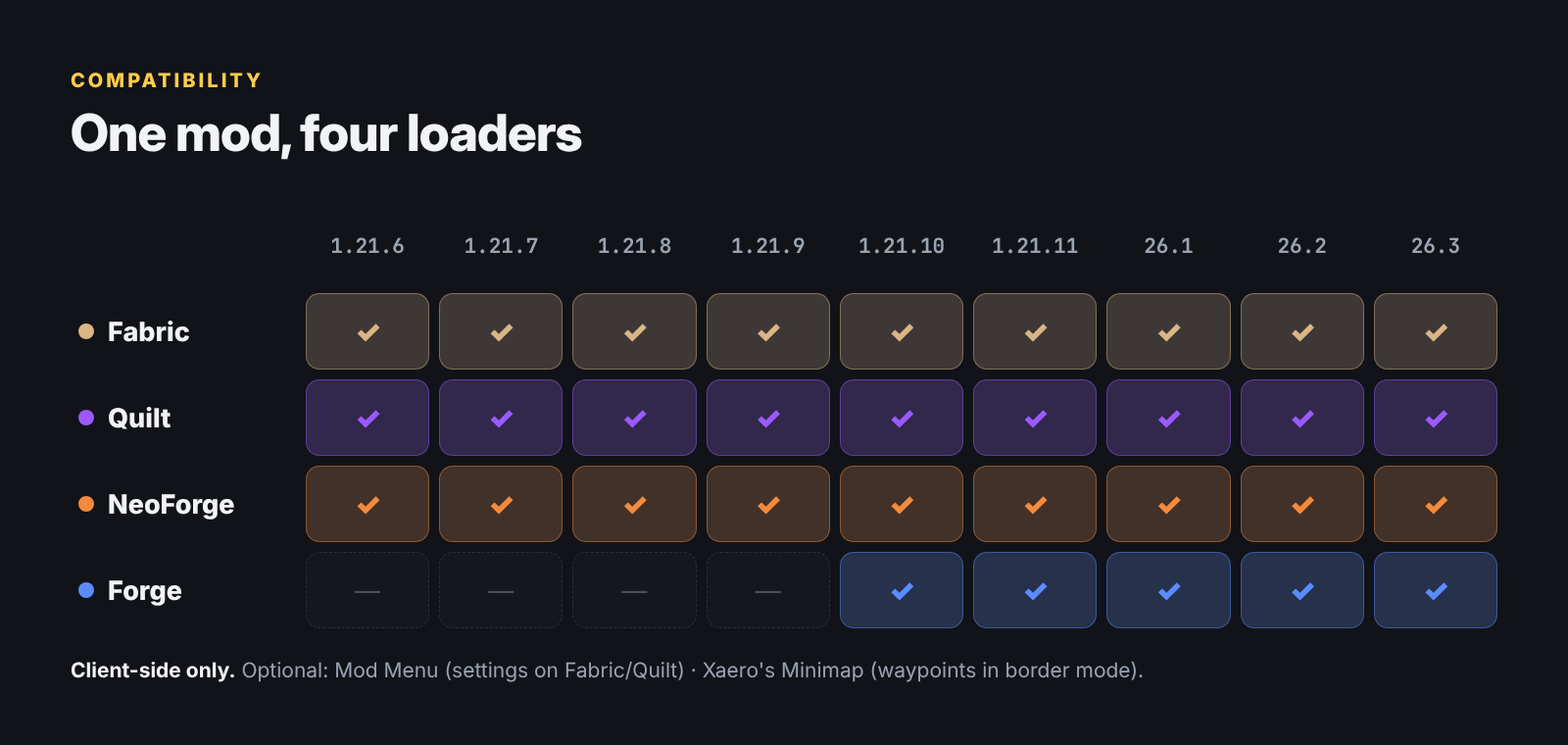
<style>
.page{position:relative;width:1568px;height:745px;background:#111318}
.page>*{position:absolute;margin:0}
.t1{font:19.6px "Inter-ExtraBold";letter-spacing:0.15em;color:#ffcc4d}
.t2{font:51px "InterDisplay-ExtraBold";letter-spacing:-0.015em;color:#f2f3f5}
.t3{font:20.6px "JetBrainsMono-Bold";color:#9aa3b2}
.t4{font:26.5px "Inter-ExtraBold";color:#f2f3f5}
.t5{font:29.4px "Inter-Black";color:#dbb585}
.t6{font:29.4px "Inter-Black";color:#9b59ff}
.t7{font:29.4px "Inter-Black";color:#f48a3c}
.t8{font:25.5px "Inter-Regular";color:#4a505c}
.t9{font:29.4px "Inter-Black";color:#5b8cff}
.t10{font:20.6px "Inter-Regular";color:#9aa3b2}
.t11{font:20.6px "Inter-Bold";color:#f2f3f5}
</style>
<div class="page">
<p class="t1" style="left:71px;top:73px;width:190px;height:15px">COMPATIBILITY</p>
<p class="t2" style="left:72px;top:113px;width:510px;height:47px">One mod, four loaders</p>
<p class="t3" style="left:332px;top:237px;width:72px;height:17px">1.21.6</p>
<p class="t3" style="left:466px;top:237px;width:72px;height:17px">1.21.7</p>
<p class="t3" style="left:599px;top:237px;width:72px;height:17px">1.21.8</p>
<p class="t3" style="left:732px;top:237px;width:73px;height:17px">1.21.9</p>
<p class="t3" style="left:859px;top:237px;width:85px;height:17px">1.21.10</p>
<p class="t3" style="left:993px;top:237px;width:85px;height:17px">1.21.11</p>
<p class="t3" style="left:1145px;top:237px;width:48px;height:17px">26.1</p>
<p class="t3" style="left:1278px;top:237px;width:48px;height:17px">26.2</p>
<p class="t3" style="left:1412px;top:237px;width:47px;height:17px">26.3</p>
<p class="t4" style="left:109px;top:320px;width:80px;height:22px">Fabric</p>
<p class="t5" style="left:357px;top:323px;width:23px;height:19px">✓</p>
<p class="t5" style="left:490px;top:323px;width:24px;height:19px">✓</p>
<p class="t5" style="left:623px;top:323px;width:24px;height:19px">✓</p>
<p class="t5" style="left:758px;top:323px;width:22px;height:19px">✓</p>
<p class="t5" style="left:891px;top:323px;width:23px;height:19px">✓</p>
<p class="t5" style="left:1024px;top:323px;width:24px;height:19px">✓</p>
<p class="t5" style="left:1157px;top:323px;width:24px;height:19px">✓</p>
<p class="t5" style="left:1292px;top:323px;width:22px;height:19px">✓</p>
<p class="t5" style="left:1425px;top:323px;width:23px;height:19px">✓</p>
<p class="t4" style="left:109px;top:407px;width:62px;height:22px">Quilt</p>
<p class="t6" style="left:357px;top:410px;width:23px;height:18px">✓</p>
<p class="t6" style="left:490px;top:410px;width:24px;height:18px">✓</p>
<p class="t6" style="left:623px;top:410px;width:24px;height:18px">✓</p>
<p class="t6" style="left:758px;top:410px;width:22px;height:18px">✓</p>
<p class="t6" style="left:891px;top:410px;width:23px;height:18px">✓</p>
<p class="t6" style="left:1024px;top:410px;width:24px;height:18px">✓</p>
<p class="t6" style="left:1157px;top:410px;width:24px;height:18px">✓</p>
<p class="t6" style="left:1292px;top:410px;width:22px;height:18px">✓</p>
<p class="t6" style="left:1425px;top:410px;width:23px;height:18px">✓</p>
<p class="t4" style="left:109px;top:494px;width:125px;height:25px">NeoForge</p>
<p class="t7" style="left:357px;top:496px;width:23px;height:18px">✓</p>
<p class="t7" style="left:490px;top:496px;width:24px;height:18px">✓</p>
<p class="t7" style="left:623px;top:496px;width:24px;height:18px">✓</p>
<p class="t7" style="left:758px;top:496px;width:22px;height:18px">✓</p>
<p class="t7" style="left:891px;top:496px;width:23px;height:18px">✓</p>
<p class="t7" style="left:1024px;top:496px;width:24px;height:18px">✓</p>
<p class="t7" style="left:1157px;top:496px;width:24px;height:18px">✓</p>
<p class="t7" style="left:1292px;top:496px;width:22px;height:18px">✓</p>
<p class="t7" style="left:1425px;top:496px;width:23px;height:18px">✓</p>
<p class="t4" style="left:109px;top:580px;width:73px;height:26px">Forge</p>
<p class="t8" style="left:355px;top:590px;width:25px;height:3px">—</p>
<p class="t8" style="left:488px;top:590px;width:26px;height:3px">—</p>
<p class="t8" style="left:621px;top:590px;width:27px;height:3px">—</p>
<p class="t8" style="left:755px;top:590px;width:26px;height:3px">—</p>
<p class="t9" style="left:891px;top:582px;width:23px;height:19px">✓</p>
<p class="t9" style="left:1024px;top:582px;width:24px;height:19px">✓</p>
<p class="t9" style="left:1157px;top:582px;width:24px;height:19px">✓</p>
<p class="t9" style="left:1292px;top:582px;width:22px;height:19px">✓</p>
<p class="t9" style="left:1425px;top:582px;width:23px;height:19px">✓</p>
<p class="t10" style="left:71px;top:661px;width:1072px;height:21px"><span class="t11">Client-side only.</span> Optional: Mod Menu (settings on Fabric/Quilt) · Xaero's Minimap (waypoints in border mode).</p>
</div>
